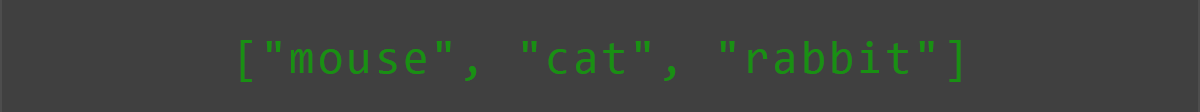
<style>
.page{position:relative;width:1200px;height:112px;background:#404040}
.page>*{position:absolute;margin:0}
.t1{font:45.8px "Consolas";letter-spacing:0.07em;color:#199013}
</style>
<div class="page">
<p class="t1" style="left:240px;top:40px;width:721px;height:42px">["mouse", "cat", "rabbit"]</p>
</div>
